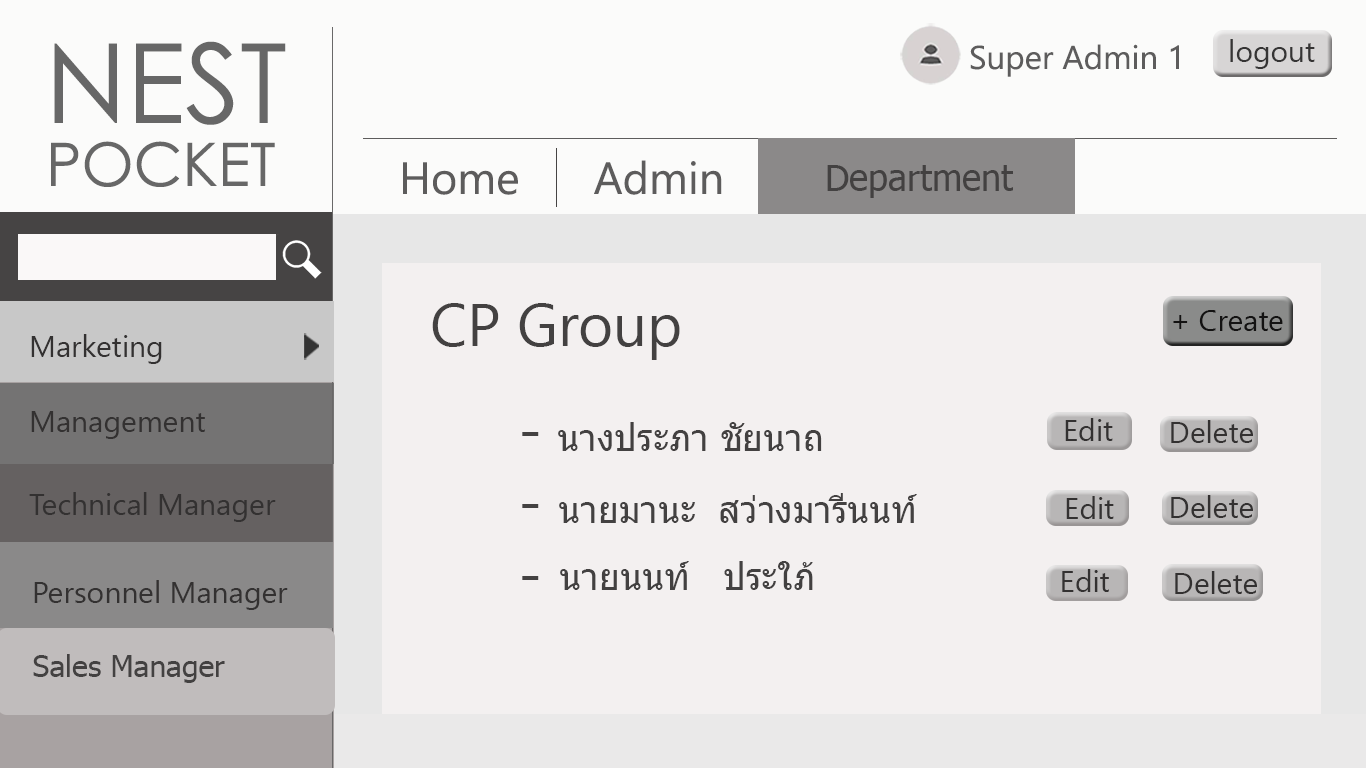
<style>
.page{position:relative;width:1366px;height:768px;background:#f3f0f0}
.page>*{position:absolute;margin:0}
.t1{font:110px "CenturyGothic";color:#676767}
.t2{font:90px "CenturyGothic";color:#676767}
.t3{font:30px "SegoeUI";color:#353434}
.t4{font:33px "SegoeUI";color:#5d5c5c}
.t5{font:60px "CenturyGothic";color:#676767}
.t6{font:45px "SegoeUI"}
.t7{font:36px "Tahoma";color:#434141}
.t8{font:60px "SegoeUI";color:#434141}
.t9{font:30px "SegoeUI";color:#131212}
.t10{font:30px "SegoeUI";color:#333131}
.t11{font:30px "Tahoma";color:#434141}
</style>
<div class="page">
<p class="t1" style="left:54px;top:41px;width:232px;height:84px"><span class="t2"><br></span>NEST</p>
<p class="t3" style="left:1230px;top:39px;width:85px;height:30px">logout</p>
<p class="t4" style="left:970px;top:44px;width:209px;height:33px">Super Admin 1</p>
<p class="t5" style="left:51px;top:141px;width:224px;height:46px">POCKET</p>
<p class="t6" style="left:403px;top:160px;width:609px;height:45px">Home      Admin    Department</p>
<p class="t7" style="left:827px;top:165px;width:186px;height:33px">Department</p>
<p class="t8" style="left:432px;top:303px;width:248px;height:57px">CP Group</p>
<p class="t9" style="left:1173px;top:310px;width:110px;height:21px">+ Create</p>
<p class="t10" style="left:31px;top:334px;width:131px;height:30px">Marketing</p>
<p class="t10" style="left:31px;top:411px;width:174px;height:28px">Management</p>
<p class="t7" style="left:558px;top:422px;width:264px;height:29px">นางประภา ชัยนาถ</p>
<p class="t10" style="left:1065px;top:418px;width:48px;height:23px">Edit</p>
<p class="t10" style="left:1171px;top:420px;width:82px;height:23px">Delete</p>
<p class="t8" style="left:522px;top:432px;width:17px;height:148px">-<br>-<br>-</p>
<p class="t10" style="left:29px;top:492px;width:247px;height:30px">Technical Manager</p>
<p class="t7" style="left:559px;top:493px;width:358px;height:30px">นายมานะ  สว่างมารีนนท์</p>
<p class="t10" style="left:1066px;top:496px;width:48px;height:23px">Edit</p>
<p class="t10" style="left:1171px;top:495px;width:82px;height:23px">Delete</p>
<p class="t7" style="left:560px;top:561px;width:253px;height:29px">นายนนท์   ประใภ้</p>
<p class="t10" style="left:1062px;top:569px;width:47px;height:23px">Edit</p>
<p class="t10" style="left:34px;top:580px;width:254px;height:30px">Personnel Manager</p>
<p class="t10" style="left:1175px;top:571px;width:82px;height:23px">Delete</p>
<p class="t11" style="left:33px;top:654px;width:192px;height:29px">Sales Manager</p>
</div>
